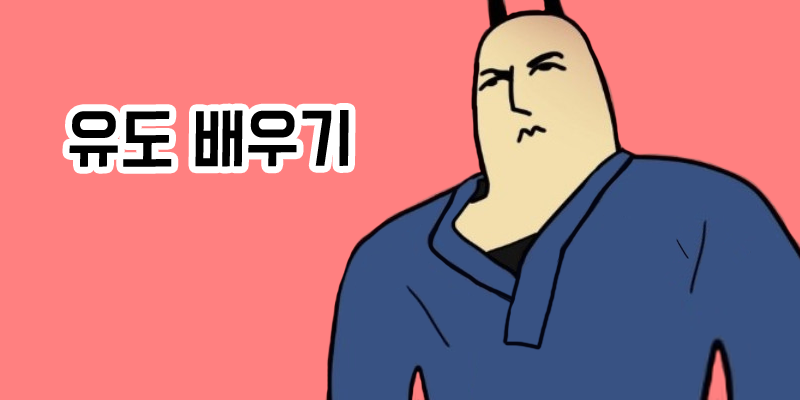
<style>
.page{position:relative;width:800px;height:400px;background:#ff8080}
.page>*{position:absolute;margin:0}
.t1{font:59px "BMDoHyeon";color:#000000;scale:0.95 1}
</style>
<div class="page">
<p class="t1" style="left:69px;top:110px;width:280px;height:57px">유도 배우기</p>
</div>
